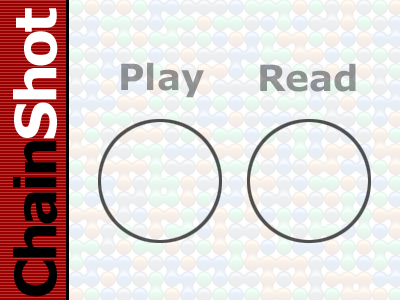
<style>
.page{position:relative;width:400px;height:300px}
.page>*{position:absolute;margin:0}
.t1{font:57px "Verdana-Bold";letter-spacing:-0.075em;color:#000000}
.t2{font:57px "Verdana-Bold";letter-spacing:-0.075em;color:#ffffff}
.t3{font:36px "Verdana-Bold";color:#909191}
.t4{font:36px "Verdana-Bold";color:#8e9391}
</style>
<div class="page">
<p class="t1" style="left:13px;top:8px;width:45px;height:289px;rotate:-90deg">Chain<span class="t2">Shot</span></p>
<p class="t3" style="left:121px;top:62px;width:83px;height:36px">Play</p>
<p class="t4" style="left:260px;top:63px;width:96px;height:29px">Read</p>
</div>
